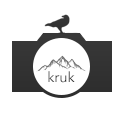
<style>
.page{position:relative;width:125px;height:126px;background:#ffffff}
.page>*{position:absolute;margin:0}
.t1{font:14px "AvenirNext-Regular"}
.t2{font:14px "AvenirNext-Regular";color:#2e2e2e}
</style>
<div class="page">
<p class="t1" style="left:48px;top:71px;width:7px;height:11px">k</p>
<p class="t2" style="left:55px;top:71px;width:20px;height:12px">ruk</p>
</div>
